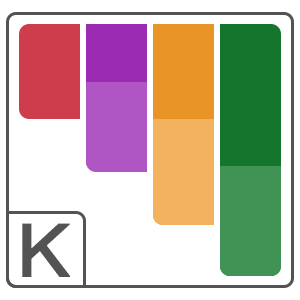
<style>
.page{position:relative;width:300px;height:300px;background:#ffffff}
.page>*{position:absolute;margin:0}
.t1{font:72px "JamrulNormal";color:#535353;font-weight:bold}
</style>
<div class="page">
<p class="t1" style="left:22px;top:223px;width:48px;height:54px">K</p>
</div>
